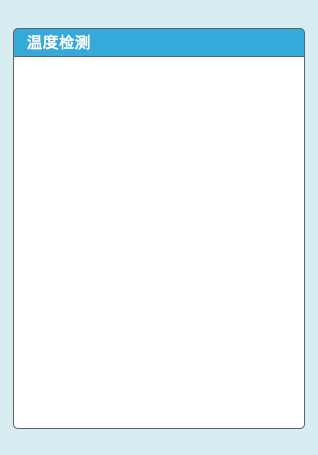
<style>
.page{position:relative;width:318px;height:455px;background:#ffffff}
.page>*{position:absolute;margin:0}
.t1{font:16px "LiHeiPro";color:#ffffff}
</style>
<div class="page">
<p class="t1" style="left:27px;top:34px;width:63px;height:16px">温度检测</p>
</div>
